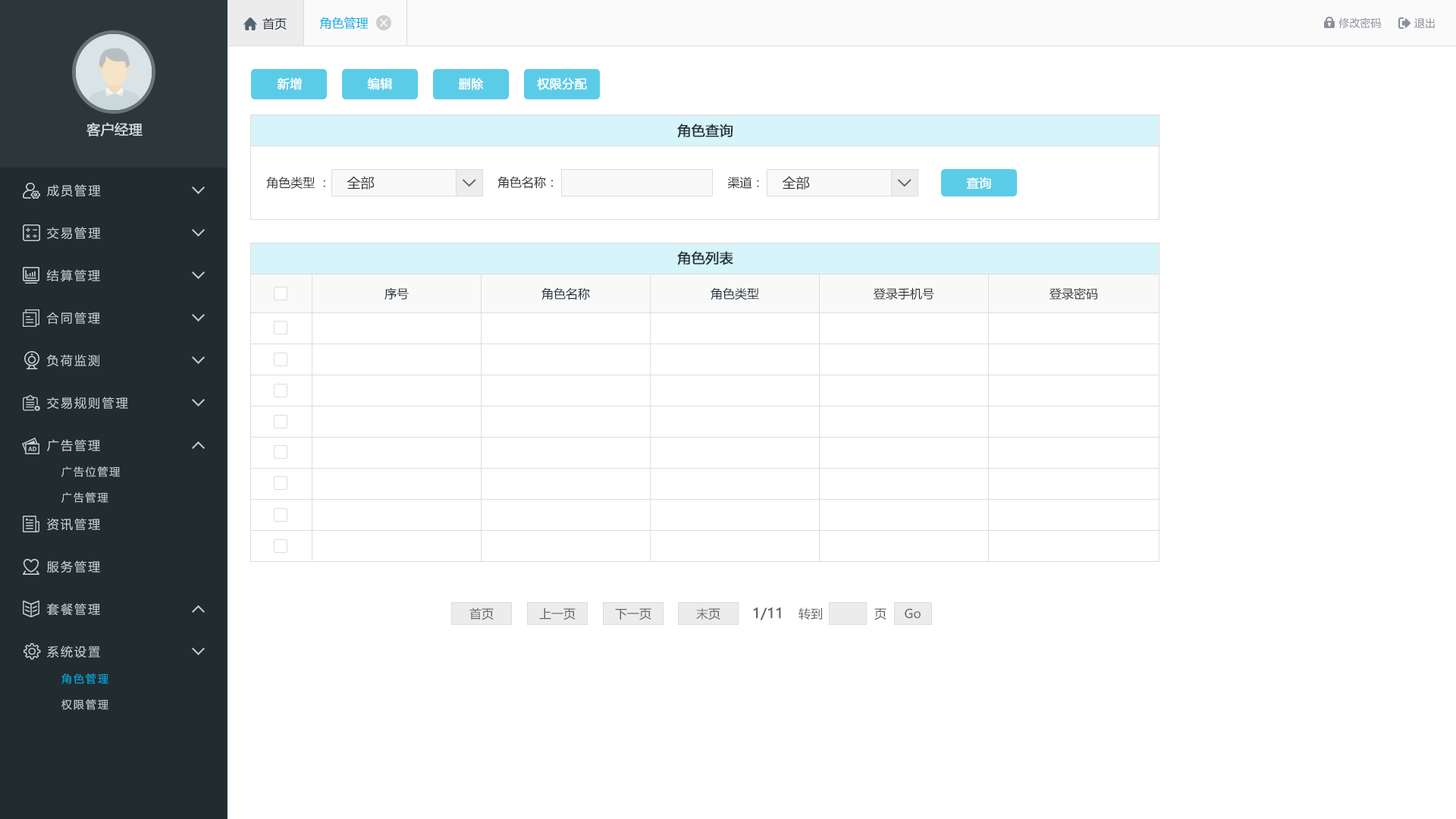
<style>
.page{position:relative;width:1456px;height:819px;background:#ffffff}
.page>*{position:absolute;margin:0}
.t1{font:12.1px "MicrosoftYaHei";color:#242e3b}
.t2{font:12.1px "MicrosoftYaHei";color:#00ace2}
.t3{font:10.6px "MicrosoftYaHei";color:#8a8f99}
.t4{font:12.1px "MicrosoftYaHei";color:#ffffff;font-weight:bold}
.t5{font:13.6px "MicrosoftYaHei";color:#d1dce2;font-weight:bold}
.t6{font:13.6px "MicrosoftYaHei";color:#242e3b;font-weight:bold}
.t7{font:12.1px "MicrosoftYaHei";letter-spacing:0.14em;color:#c2cdd2}
.t8{font:12.1px "MicrosoftYaHei";color:#333333}
.t9{font:13.6px "MicrosoftYaHei";color:#333333}
.t10{font:10.6px "MicrosoftYaHei";letter-spacing:0.14em;color:#c2cdd2}
.t11{font:12.1px "MicrosoftYaHei";color:#61656b}
.t12{font:13.6px "MicrosoftYaHei";color:#61656b;font-weight:bold}
.t13{font:10.6px "MicrosoftYaHei";letter-spacing:0.14em;color:#00ace2}
</style>
<div class="page">
<p class="t1" style="left:262px;top:17px;width:25px;height:13px">首页</p>
<p class="t2" style="left:319px;top:17px;width:50px;height:13px">角色管理</p>
<p class="t3" style="left:1338px;top:17px;width:43px;height:12px">修改密码</p>
<p class="t3" style="left:1414px;top:17px;width:21px;height:11px">退出</p>
<p class="t4" style="left:277px;top:77px;width:25px;height:13px">新增</p>
<p class="t4" style="left:367px;top:77px;width:26px;height:13px">编辑</p>
<p class="t4" style="left:458px;top:77px;width:26px;height:13px">删除</p>
<p class="t4" style="left:537px;top:77px;width:50px;height:13px">权限分配</p>
<p class="t5" style="left:86px;top:122px;width:57px;height:14px">客户经理</p>
<p class="t6" style="left:677px;top:124px;width:56px;height:14px">角色查询</p>
<p class="t7" style="left:47px;top:184px;width:54px;height:13px">成员管理</p>
<p class="t8" style="left:266px;top:177px;width:59px;height:12px">角色类型 ：</p>
<p class="t9" style="left:347px;top:176px;width:28px;height:14px">全部</p>
<p class="t8" style="left:497px;top:176px;width:56px;height:13px">角色名称：</p>
<p class="t8" style="left:727px;top:177px;width:32px;height:12px">渠道：</p>
<p class="t9" style="left:782px;top:176px;width:28px;height:14px">全部</p>
<p class="t4" style="left:966px;top:177px;width:25px;height:12px">查询</p>
<p class="t7" style="left:47px;top:227px;width:54px;height:13px">交易管理</p>
<p class="t6" style="left:677px;top:251px;width:56px;height:14px">角色列表</p>
<p class="t7" style="left:46px;top:269px;width:54px;height:13px">结算管理</p>
<p class="t1" style="left:384px;top:287px;width:25px;height:13px">序号</p>
<p class="t1" style="left:541px;top:287px;width:49px;height:13px">角色名称</p>
<p class="t1" style="left:711px;top:287px;width:48px;height:13px">角色类型</p>
<p class="t8" style="left:874px;top:287px;width:60px;height:13px">登录手机号</p>
<p class="t8" style="left:1050px;top:287px;width:48px;height:13px">登录密码</p>
<p class="t7" style="left:46px;top:312px;width:54px;height:13px">合同管理</p>
<p class="t7" style="left:46px;top:354px;width:53px;height:13px">负荷监测</p>
<p class="t7" style="left:47px;top:397px;width:81px;height:12px">交易规则管理</p>
<p class="t7" style="left:47px;top:439px;width:53px;height:12px">广告管理</p>
<p class="t10" style="left:61px;top:466px;width:59px;height:11px">广告位管理</p>
<p class="t10" style="left:61px;top:492px;width:47px;height:11px">广告管理</p>
<p class="t7" style="left:47px;top:518px;width:53px;height:13px">资讯管理</p>
<p class="t7" style="left:47px;top:560px;width:53px;height:13px">服务管理</p>
<p class="t7" style="left:47px;top:603px;width:53px;height:13px">套餐管理</p>
<p class="t11" style="left:469px;top:607px;width:25px;height:13px">首页</p>
<p class="t11" style="left:539px;top:608px;width:37px;height:12px">上一页</p>
<p class="t11" style="left:615px;top:608px;width:36px;height:12px">下一页</p>
<p class="t11" style="left:696px;top:607px;width:24px;height:13px">末页</p>
<p class="t12" style="left:753px;top:607px;width:28px;height:13px">1/11</p>
<p class="t11" style="left:799px;top:607px;width:23px;height:13px">转到</p>
<p class="t11" style="left:874px;top:608px;width:12px;height:12px">页</p>
<p class="t11" style="left:905px;top:608px;width:16px;height:11px">Go</p>
<p class="t7" style="left:47px;top:645px;width:53px;height:13px">系统设置</p>
<p class="t13" style="left:61px;top:673px;width:47px;height:11px">角色管理</p>
<p class="t10" style="left:61px;top:699px;width:47px;height:11px">权限管理</p>
</div>
